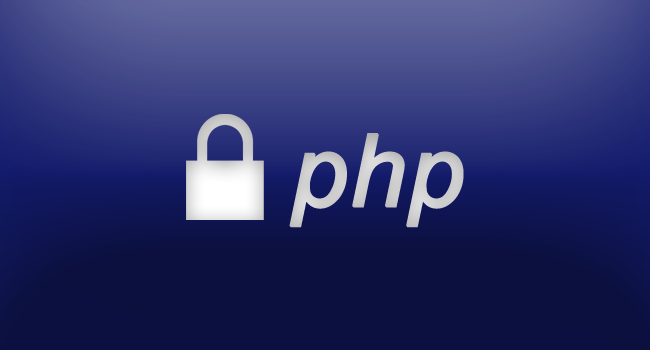
<style>
.page{position:relative;width:650px;height:350px}
.page>*{position:absolute;margin:0}
.t1{font:100px "Arial-ItalicMT";color:#cecece;font-weight:bold}
</style>
<div class="page">
<p class="t1" style="left:289px;top:133px;width:175px;height:95px">php</p>
</div>
